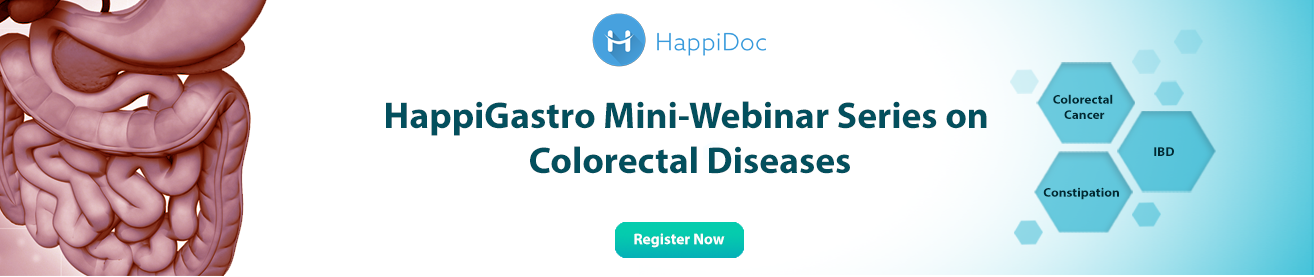
<style>
.page{position:relative;width:1314px;height:277px;background:#ffffff}
.page>*{position:absolute;margin:0}
.t1{font:37.5px "MyriadPro-Bold";color:#034f5d}
.t2{font:12.6px "MyriadPro-Bold";color:#012932;scale:1.06 1}
.t3{font:15.4px "MyriadPro-Bold";color:#fefefe}
</style>
<div class="page">
<p class="t1" style="left:386px;top:101px;width:601px;height:73px;text-align:center">HappiGastro Mini-Webinar Series on <br>Colorectal Diseases</p>
<p class="t2" style="left:1053px;top:94px;width:60px;height:25px;text-align:center">Colorectal <br>Cancer</p>
<p class="t2" style="left:1154px;top:147px;width:20px;height:9px">IBD</p>
<p class="t2" style="left:1043px;top:187px;width:76px;height:13px">Constipation</p>
<p class="t3" style="left:634px;top:233px;width:91px;height:15px">Register Now</p>
</div>
